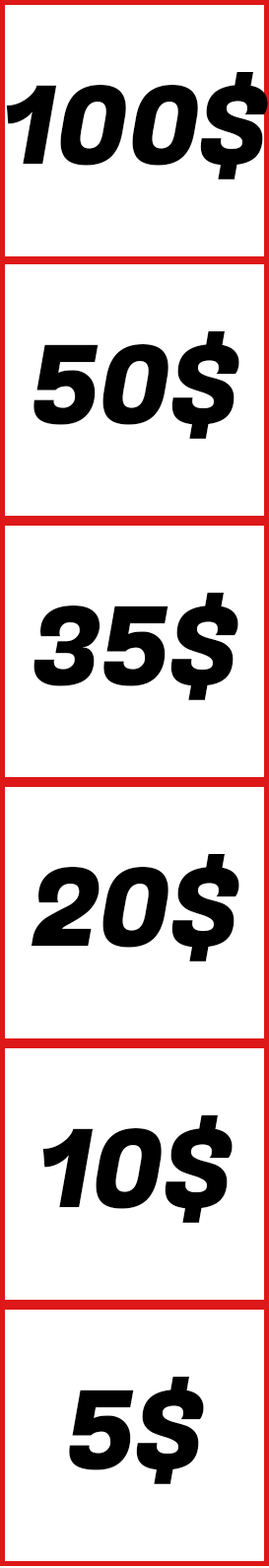
<style>
.page{position:relative;width:269px;height:1568px;background:#ffffff}
.page>*{position:absolute;margin:0}
.t1{font:108.5px "FugazOne-Regular";color:#000000}
</style>
<div class="page">
<p class="t1" style="left:6px;top:72px;width:262px;height:107px">100$</p>
<p class="t1" style="left:34px;top:331px;width:206px;height:108px">50$</p>
<p class="t1" style="left:34px;top:593px;width:205px;height:107px">35$</p>
<p class="t1" style="left:31px;top:854px;width:209px;height:108px">20$</p>
<p class="t1" style="left:42px;top:1115px;width:191px;height:108px">10$</p>
<p class="t1" style="left:69px;top:1377px;width:135px;height:107px">5$</p>
</div>
